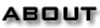
<style>
.page{position:relative;width:100px;height:28px;background:#ffffff}
.page>*{position:absolute;margin:0}
.t1{font:24px "BankGothicBT-Medium";color:#000000}
</style>
<div class="page">
<p class="t1" style="left:2px;top:7px;width:94px;height:13px">ABOUT</p>
</div>
